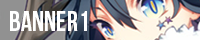
<style>
.page{position:relative;width:200px;height:40px}
.page>*{position:absolute;margin:0}
.t1{font:28.2px "BebasNeue";color:#ffffff}
</style>
<div class="page">
<p class="t1" style="left:10px;top:11px;width:77px;height:20px">BANNER1</p>
</div>
